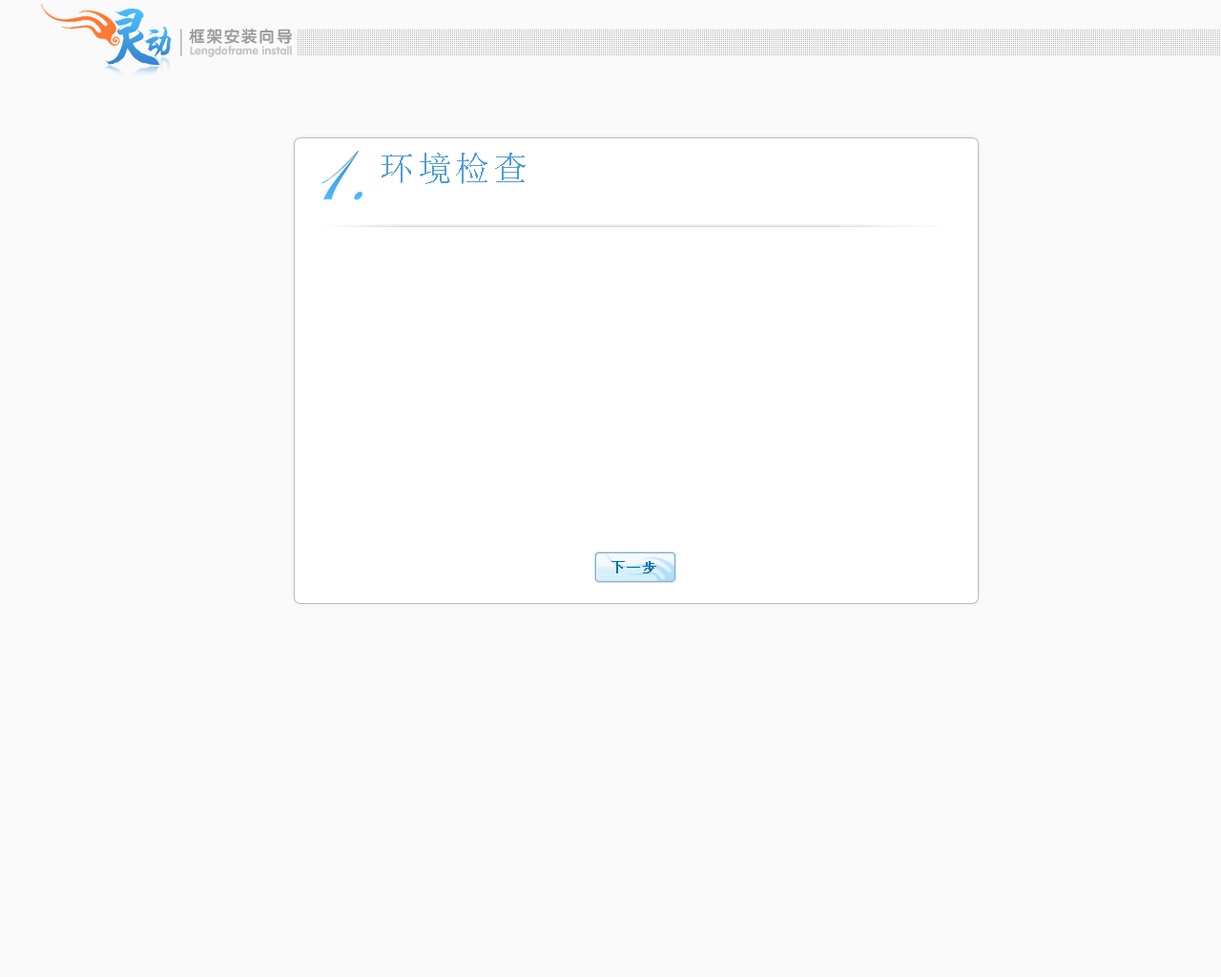
<style>
.page{position:relative;width:1221px;height:977px;background:#fafafa}
.page>*{position:absolute;margin:0}
.t1{font:34.3px "HYi4gj";letter-spacing:0.06em;color:#409fe5}
.t2{font:16.2px "FZY4JW--GB1-0";letter-spacing:0.075em;color:#9c9c9c}
.t3{font:11.4px "FZY4JW--GB1-0";letter-spacing:0.02em;color:#c3c3c3}
.t4{font:95.4px "EdwardianScriptITC";color:#46b3f5}
.t5{font:34.3px "NSimSun";letter-spacing:0.1em;color:#4f9dd5}
.t6{font:13.4px "SimSun";letter-spacing:0.1em;color:#006fad;font-weight:bold}
</style>
<div class="page">
<p class="t1" style="left:144px;top:27px;width:28px;height:30px">动</p>
<p class="t2" style="left:189px;top:29px;width:103px;height:15px">框架安装向导</p>
<p class="t3" style="left:190px;top:46px;width:102px;height:11px">Lengdoframe install</p>
<p class="t4" style="left:321px;top:150px;width:41px;height:50px">1.</p>
<p class="t5" style="left:382px;top:153px;width:144px;height:31px">环境检查</p>
<p class="t6" style="left:611px;top:561px;width:45px;height:12px">下一步</p>
</div>
